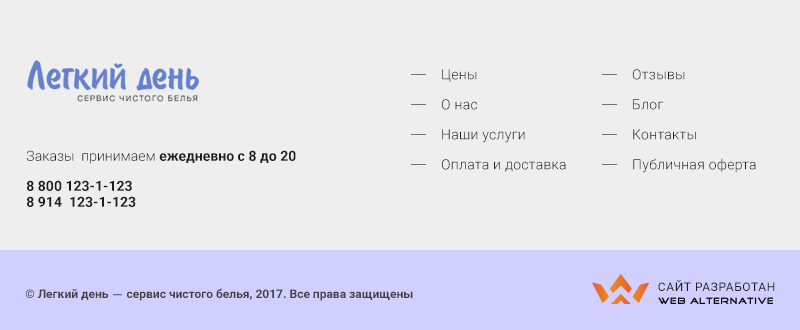
<style>
.page{position:relative;width:800px;height:330px;background:#eeeeee}
.page>*{position:absolute;margin:0}
.t1{font:14px/20px "Roboto-Light";letter-spacing:0.02em;color:#211d1e}
.t2{font:14px "Roboto-Bold";color:#211d1e}
.t3{font:14px "Roboto-Light";color:#211d1e}
.t4{font:14px/16px "Roboto-Bold";color:#211d1e}
.t5{font:12px "Roboto-Regular";letter-spacing:0.05em;color:#211d1e;text-transform:uppercase}
.t6{font:12px "Roboto-Bold";color:#424242}
.t7{font:12px "HelveticaNeue";color:#424242}
</style>
<div class="page">
<p class="t1" style="left:441px;top:69px;width:125px;height:103px">Цены<br>О нас<br>Наши услуги<br>Оплата и доставка</p>
<p class="t1" style="left:632px;top:69px;width:124px;height:104px">Отзывы<br>Блог<br>Контакты<br>Публичная оферта</p>
<p class="t2" style="left:26px;top:150px;width:270px;height:14px"><span class="t3">Заказы  принимаем </span>ежедневно с 8 до 20</p>
<p class="t4" style="left:27px;top:180px;width:109px;height:27px">8 800 123-1-123 <br>8 914  123-1-123</p>
<p class="t5" style="left:658px;top:280px;width:117px;height:11px">Сайт разработан</p>
<p class="t6" style="left:25px;top:288px;width:388px;height:13px">© Легкий день <span class="t7">—</span> сервис чистого белья, 2017. Все права защищены</p>
</div>
